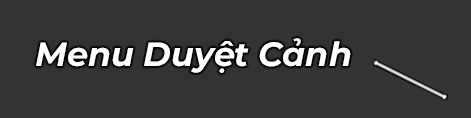
<style>
.page{position:relative;width:471px;height:118px;background:#333333}
.page>*{position:absolute;margin:0}
.t1{font:57.3px "Montserrat-BoldItalic";color:#ffffff}
</style>
<div class="page">
<p class="t1" style="left:36px;top:38px;width:315px;height:35px">Menu Duyệt Cảnh</p>
</div>
